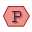
<style>
.page{position:relative;width:32px;height:32px;background:#ffffff}
.page>*{position:absolute;margin:0}
.t1{font:15px "Century";color:#681c1c}
</style>
<div class="page">
<p class="t1" style="left:12px;top:11px;width:9px;height:11px">P</p>
</div>
